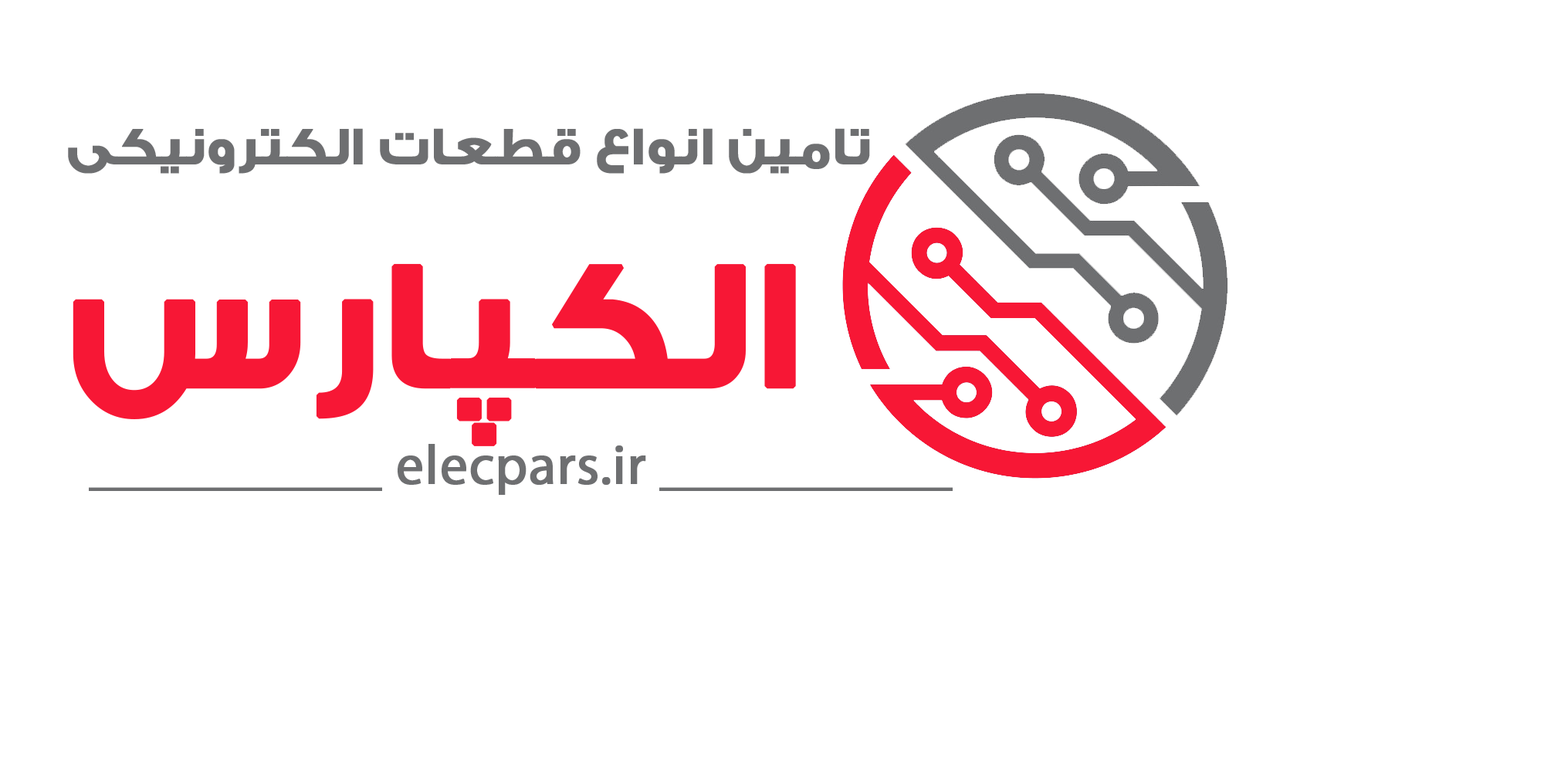
<style>
.page{position:relative;width:1544px;height:772px;background:#ffffff}
.page>*{position:absolute;margin:0}
.t1{font:54.1px "MRT_TwoBold-Bold";color:#6e6f71;font-weight:bold}
.t2{font:185.3px "MRT_TwoBold-Bold";color:#f71735;font-weight:bold}
.t3{font:55.6px "MyriadPro-Regular";color:#6e6f71;font-weight:bold}
</style>
<div class="page">
<p class="t1" style="left:68px;top:128px;width:802px;height:46px">تامین انواع قطعات الکترونیکی</p>
<p class="t2" style="left:73px;top:263px;width:723px;height:183px">الکپارس</p>
<p class="t3" style="left:89px;top:444px;width:864px;height:51px">__________ elecpars.ir __________</p>
</div>
